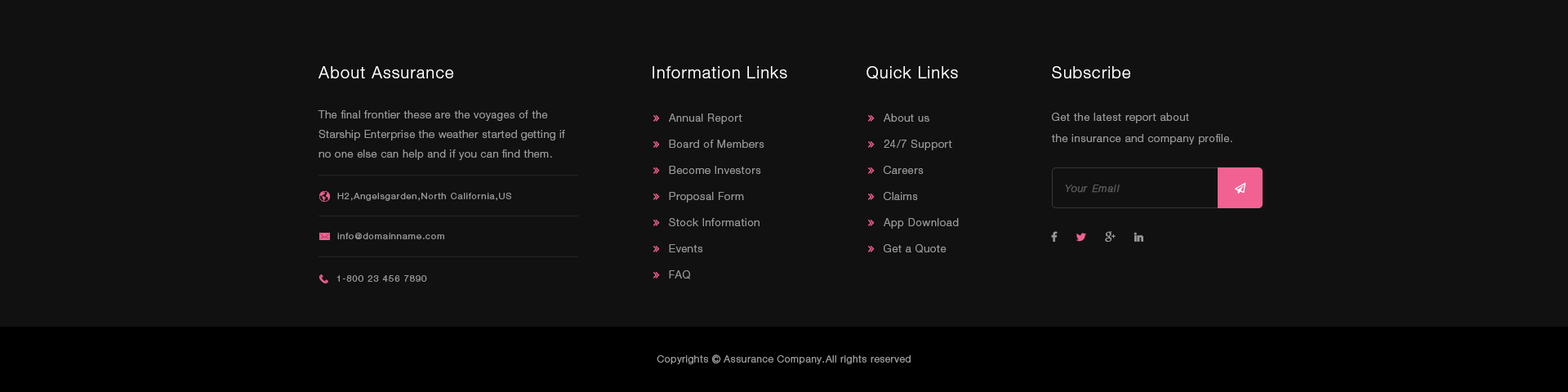
<style>
.page{position:relative;width:1568px;height:392px;background:#111111}
.page>*{position:absolute;margin:0}
.t1{font:16.3px "HelveticaNeueLTStd-Lt";letter-spacing:0.06em;color:#ffffff}
.t2{font:10.6px/19.6px "HelveticaNeueLTStd-Lt";letter-spacing:0.05em;color:#989898}
.t3{font:10.6px/21.2px "HelveticaNeueLTStd-Lt";letter-spacing:0.06em;color:#989898}
.t4{font:9.8px "HelveticaNeue-UltraLightItal";letter-spacing:0.12em;color:#5c5c5c;font-weight:bold}
.t5{font:9px "HelveticaNeueLTStd-Lt";letter-spacing:0.1em;color:#989898}
</style>
<div class="page">
<p class="t1" style="left:318px;top:66px;width:135px;height:12px">About Assurance</p>
<p class="t1" style="left:653px;top:66px;width:134px;height:12px">Information Links</p>
<p class="t1" style="left:866px;top:66px;width:92px;height:13px">Quick Links</p>
<p class="t1" style="left:1052px;top:66px;width:78px;height:12px">Subscribe</p>
<p class="t2" style="left:318px;top:110px;width:247px;height:50px">The final frontier these are the voyages of the Starship Enterprise the weather started getting if no one else can help and if you can find them.</p>
<p class="t3" style="left:1051px;top:113px;width:181px;height:32px">Get the latest report about <br>the insurance and company profile.</p>
<p class="t4" style="left:1065px;top:185px;width:55px;height:8px">Your Email</p>
<p class="t5" style="left:337px;top:193px;width:174px;height:8px">H2,Angelsgarden,North California,US</p>
<p class="t5" style="left:337px;top:233px;width:107px;height:6px">info@domainname.com</p>
<p class="t5" style="left:336px;top:275px;width:91px;height:7px">1-800 23 456 7890</p>
</div>
